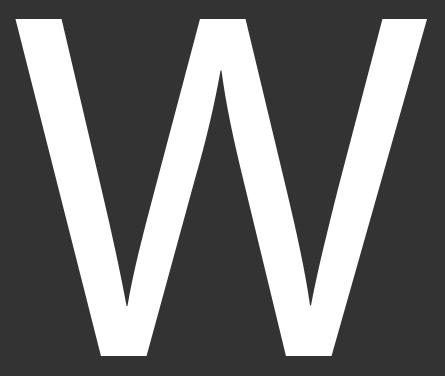
<style>
.page{position:relative;width:445px;height:376px;background:#333333}
.page>*{position:absolute;margin:0}
.t1{font:500px "MyriadPro-Regular";color:#ffffff}
</style>
<div class="page">
<p class="t1" style="left:15px;top:19px;width:412px;height:337px">W</p>
</div>
